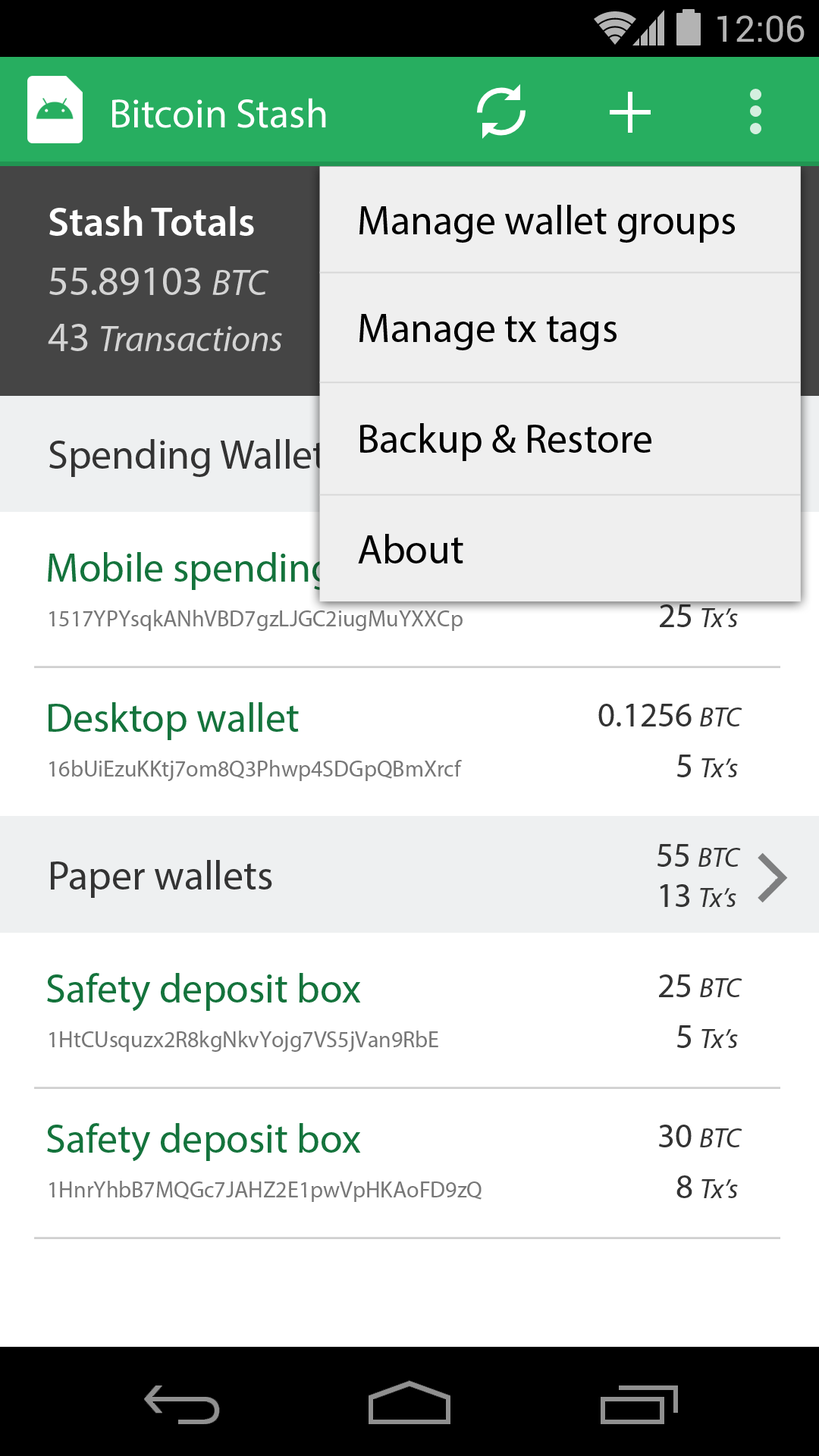
<style>
.page{position:relative;width:819px;height:1456px;background:#ffffff}
.page>*{position:absolute;margin:0}
.t1{font:36.4px "Roboto-Regular";color:#b3b3b3}
.t2{font:40.9px "MyriadPro-Regular";color:#ffffff}
.t3{font:40.9px "MyriadPro-Semibold";color:#ffffff}
.t4{font:40.9px "MyriadPro-Regular";color:#000000}
.t5{font:40.9px "MyriadPro-Regular";color:#d4d4d4}
.t6{font:36.4px "MyriadPro-It";color:#d4d4d4}
.t7{font:40.9px "MyriadPro-Regular";color:#333333}
.t8{font:40.9px "MyriadPro-Regular";color:#14733c}
.t9{font:27.3px "MyriadPro-It";color:#333333}
.t10{font:34px "MyriadPro-Regular";color:#333333}
.t11{font:22.7px "MyriadPro-Regular";color:#777777}
</style>
<div class="page">
<p class="t1" style="left:717px;top:15px;width:88px;height:27px">12:06</p>
<p class="t2" style="left:112px;top:98px;width:214px;height:30px">Bitcoin Stash</p>
<p class="t3" style="left:49px;top:206px;width:205px;height:30px">Stash Totals</p>
<p class="t4" style="left:359px;top:205px;width:376px;height:38px">Manage wallet groups</p>
<p class="t5" style="left:49px;top:268px;width:220px;height:27px">55.89103 <span class="t6">BTC</span></p>
<p class="t4" style="left:359px;top:314px;width:258px;height:36px">Manage tx tags</p>
<p class="t6" style="left:48px;top:324px;width:234px;height:27px"><span class="t5">43 </span>Transactions</p>
<p class="t4" style="left:360px;top:423px;width:291px;height:38px">Backup &amp; Restore</p>
<p class="t7" style="left:49px;top:439px;width:292px;height:38px">Spending Wallets</p>
<p class="t4" style="left:358px;top:534px;width:105px;height:29px">About</p>
<p class="t8" style="left:48px;top:552px;width:397px;height:38px">Mobile spending wallet</p>
<p class="t9" style="left:660px;top:604px;width:78px;height:23px"><span class="t10">25 </span>Tx’s</p>
<p class="t11" style="left:49px;top:610px;width:414px;height:21px">1517YPYsqkANhVBD7gzLJGC2iugMuYXXCp</p>
<p class="t8" style="left:49px;top:702px;width:250px;height:38px">Desktop wallet</p>
<p class="t10" style="left:598px;top:704px;width:144px;height:22px">0.1256 <span class="t9">BTC</span></p>
<p class="t11" style="left:49px;top:760px;width:413px;height:21px">16bUiEzuKKtj7om8Q3Phwp4SDGpQBmXrcf</p>
<p class="t9" style="left:677px;top:755px;width:61px;height:22px"><span class="t10">5 </span>Tx’s</p>
<p class="t9" style="left:657px;top:844px;width:84px;height:23px"><span class="t10">55 </span>BTC</p>
<p class="t7" style="left:51px;top:860px;width:221px;height:38px">Paper wallets</p>
<p class="t9" style="left:660px;top:884px;width:76px;height:23px"><span class="t10">13 </span>Tx’s</p>
<p class="t8" style="left:47px;top:973px;width:314px;height:38px">Safety deposit box</p>
<p class="t9" style="left:659px;top:974px;width:83px;height:23px"><span class="t10">25 </span>BTC</p>
<p class="t9" style="left:677px;top:1025px;width:61px;height:23px"><span class="t10">5 </span>Tx’s</p>
<p class="t11" style="left:49px;top:1031px;width:389px;height:21px">1HtCUsquzx2R8kgNkvYojg7VS5jVan9RbE</p>
<p class="t8" style="left:47px;top:1123px;width:314px;height:38px">Safety deposit box</p>
<p class="t9" style="left:659px;top:1125px;width:83px;height:22px"><span class="t10">30 </span>BTC</p>
<p class="t11" style="left:49px;top:1181px;width:433px;height:21px">1HnrYhbB7MQGc7JAHZ2E1pwVpHKAoFD9zQ</p>
<p class="t9" style="left:676px;top:1175px;width:62px;height:23px"><span class="t10">8 </span>Tx’s</p>
</div>
